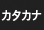
<style>
.page{position:relative;width:44px;height:30px;background:#202020}
.page>*{position:absolute;margin:0}
.t1{font:12px "HiraKakuProN-W3";color:#ffffff;font-weight:bold;scale:0.9 1}
</style>
<div class="page">
<p class="t1" style="left:1px;top:10px;width:41px;height:11px">カタカナ</p>
</div>
